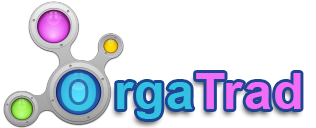
<style>
.page{position:relative;width:316px;height:128px;background:#ffffff}
.page>*{position:absolute;margin:0}
.t1{font:50px "Arial-BoldMT";letter-spacing:0.02em;color:#33c1e2}
.t2{font:50px "Arial-BoldMT";letter-spacing:0.02em;color:#33a656}
.t3{font:50px "Arial-BoldMT";letter-spacing:0.02em;color:#f16df6}
</style>
<div class="page">
<p class="t1" style="left:61px;top:73px;width:35px;height:38px;opacity:0.76"><span class="t2"> </span>O</p>
<p class="t3" style="left:117px;top:73px;width:184px;height:46px"><span class="t2"> </span><span class="t1">rga</span>Trad</p>
</div>
